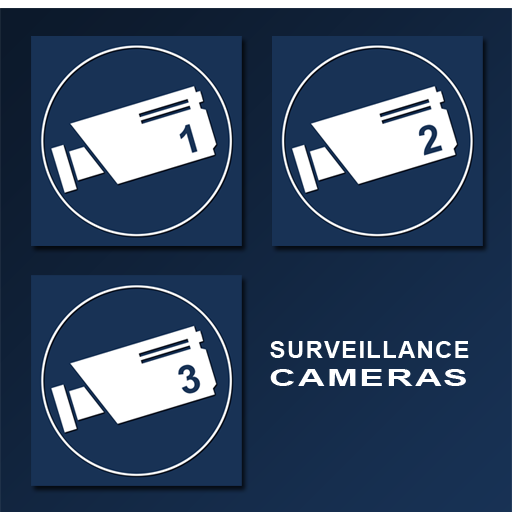
<style>
.page{position:relative;width:512px;height:512px;background:#183255}
.page>*{position:absolute;margin:0}
.t1{font:24px "Arial-BoldMT";letter-spacing:0.05em;color:#ffffff}
.t2{font:24px "Arial-BoldMT";letter-spacing:0.05em;color:#ffffff;scale:1.54 1}
</style>
<div class="page">
<p class="t1" style="left:270px;top:341px;width:199px;height:17px">SURVEILLANCE</p>
<p class="t2" style="left:270px;top:369px;width:196px;height:17px">CAMERAS</p>
</div>
